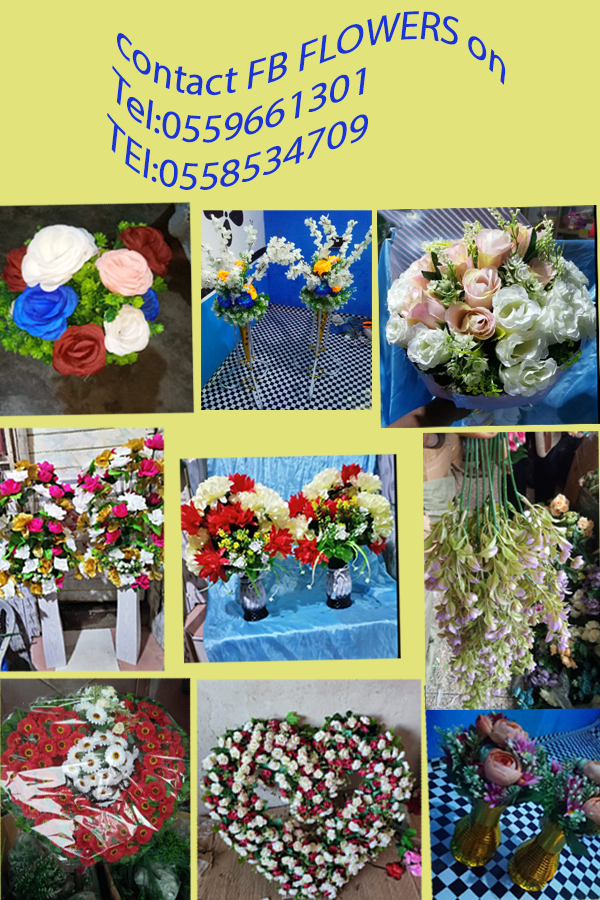
<style>
.page{position:relative;width:600px;height:900px;background:#e2e47b}
.page>*{position:absolute;margin:0}
.t1{font:39.8px "MyriadPro-Regular";color:#1b35d4}
</style>
<div class="page">
<p class="t1" style="left:107px;top:11px;width:399px;height:179px;rotate:6deg">contact FB FLOWERS on<br>Tel:0559661301<br>TEl:0558534709</p>
</div>
